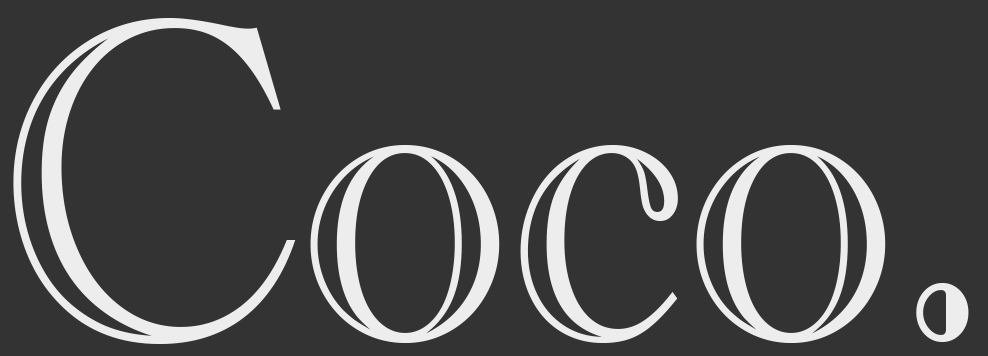
<style>
.page{position:relative;width:988px;height:356px;background:#333333}
.page>*{position:absolute;margin:0}
.t1{font:470.8px "AcademyEngravedLetPlain";color:#ededed;scale:0.88 1}
</style>
<div class="page">
<p class="t1" style="left:13px;top:18px;width:956px;height:326px">Coco.</p>
</div>
